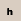
<style>
.page{position:relative;width:21px;height:21px;background:#d9cdc1}
.page>*{position:absolute;margin:0}
.t1{font:9px "Tahoma-Bold";color:#000000}
</style>
<div class="page">
<p class="t1" style="left:7px;top:8px;width:6px;height:7px">h</p>
</div>
